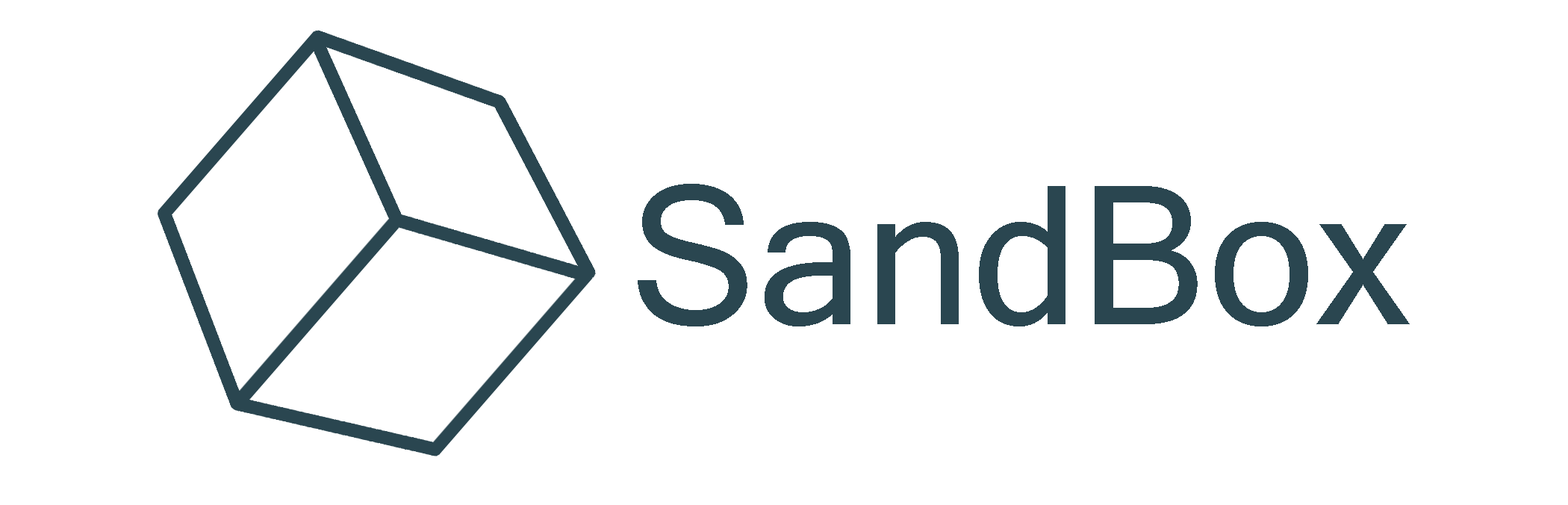
<style>
.page{position:relative;width:1568px;height:505px;background:#ffffff}
.page>*{position:absolute;margin:0}
.t1{font:192.9px "MicrosoftSansSerif";color:#2a4650}
</style>
<div class="page">
<p class="t1" style="left:638px;top:184px;width:772px;height:142px">SandBox</p>
</div>
